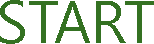
<style>
.page{position:relative;width:154px;height:44px;background:#ffffff}
.page>*{position:absolute;margin:0}
.t1{font:60px "Leelawadee";color:#347122;scale:0.96 1}
</style>
<div class="page">
<p class="t1" style="left:0px;top:0px;width:154px;height:44px">START</p>
</div>
